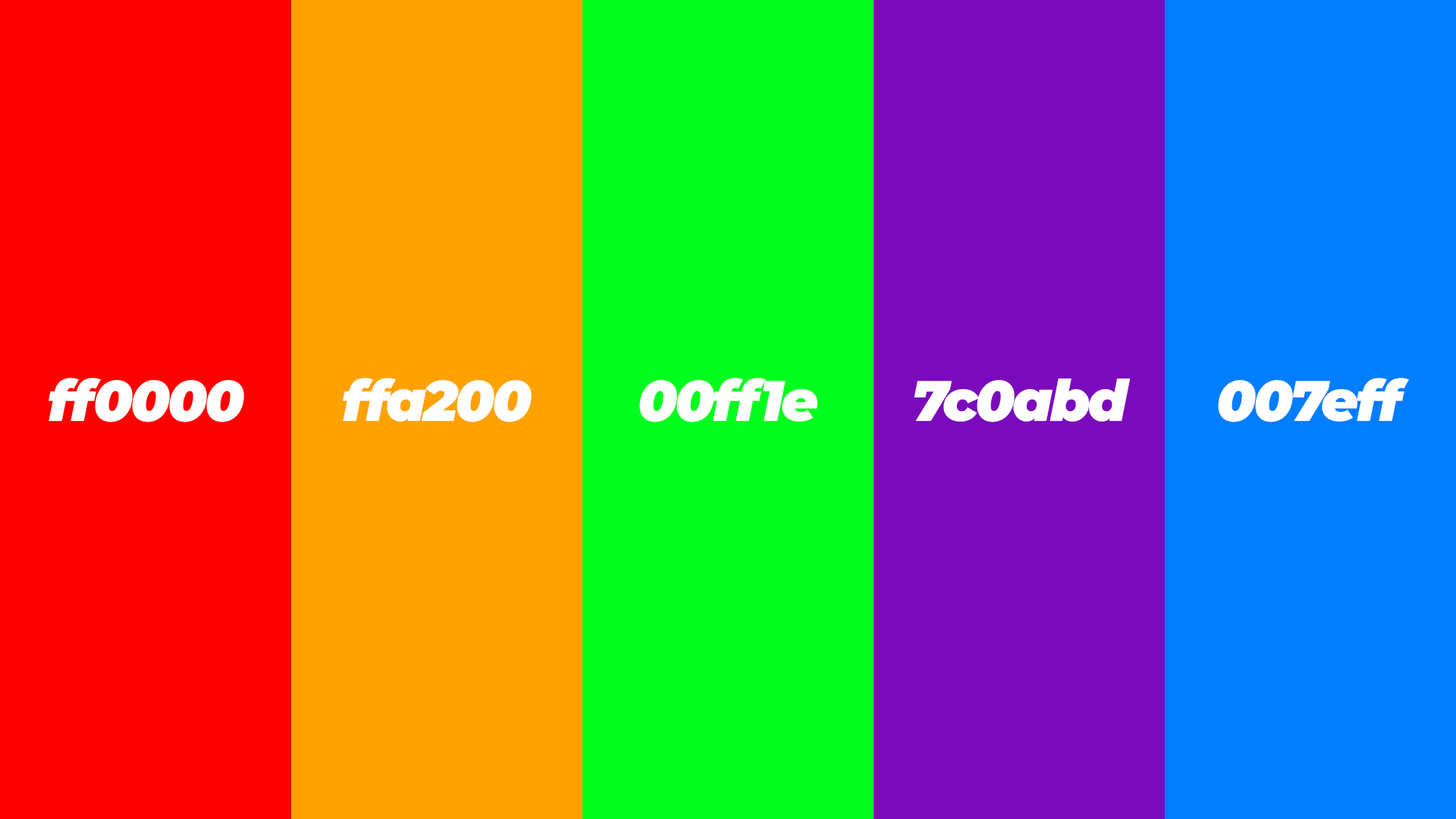
<style>
.page{position:relative;width:1456px;height:819px}
.page>*{position:absolute;margin:0}
.t1{font:56.9px "MontserratItalic-BlackItalic";letter-spacing:-0.04em;color:#ffffff}
</style>
<div class="page">
<p class="t1" style="left:49px;top:378px;width:195px;height:44px">ff0000</p>
<p class="t1" style="left:343px;top:378px;width:189px;height:44px">ffa200</p>
<p class="t1" style="left:639px;top:378px;width:178px;height:44px">00ff1e</p>
<p class="t1" style="left:1218px;top:378px;width:191px;height:44px">007eff</p>
<p class="t1" style="left:914px;top:378px;width:216px;height:44px">7c0abd</p>
</div>
